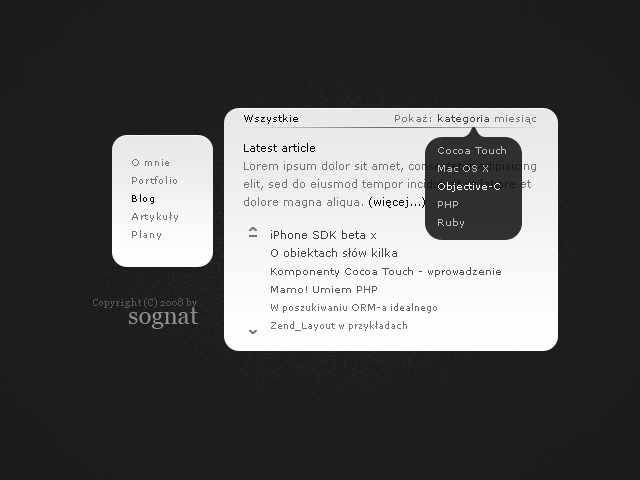
<style>
.page{position:relative;width:640px;height:480px;background:#1c1c1c}
.page>*{position:absolute;margin:0}
.t1{font:10px "Verdana";color:#000000}
.t2{font:10px "Verdana";color:#434343}
.t3{font:10px "Verdana";color:#747474}
.t4{font:10px/18px "Verdana";color:#bcbcbc}
.t5{font:10px/18px "Verdana";color:#ffffff}
.t6{font:9px/18px "Verdana";letter-spacing:0.075em;color:#747474}
.t7{font:9px/18px "Verdana";letter-spacing:0.075em;color:#000000}
.t8{font:9px/18px "Verdana"}
.t9{font:11px/18px "Verdana"}
.t10{font:10px/18px "Verdana"}
.t11{font:10px "Georgia";color:#555555}
.t12{font:24px "Georgia";color:#8f8f8f}
</style>
<div class="page">
<p class="t1" style="left:244px;top:114px;width:54px;height:10px">Wszystkie</p>
<p class="t2" style="left:395px;top:114px;width:141px;height:10px"><span class="t3">Pokaż: </span>kategoria<span class="t3"> miesiąc</span></p>
<p class="t4" style="left:438px;top:146px;width:68px;height:82px">Cocoa Touch<br>Mac OS X<br><span class="t5">Objective-C<br></span>PHP<br>Ruby</p>
<p class="t6" style="left:132px;top:159px;width:46px;height:81px">O mnie<br>Portfolio<br><span class="t7">Blog<br></span>Artykuły<br>Plany</p>
<p class="t8" style="left:271px;top:230px;width:230px;height:101px"><span class="t9"><br> iPhone SDK beta x<br> O obiektach słów kilka</span><span class="t10"><br> Komponenty Cocoa Touch - wprowadzenie<br> Mamo! Umiem PHP<br></span> W poszukiwaniu ORM-a idealnego<br> Zend_Layout w przykładach</p>
<p class="t11" style="left:93px;top:298px;width:104px;height:10px">Copyright (C) 2008 by</p>
<p class="t12" style="left:128px;top:308px;width:70px;height:21px">sognat</p>
</div>
